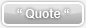
<style>
.page{position:relative;width:86px;height:28px}
.page>*{position:absolute;margin:0}
.t1{font:13.2px "ArialRoundedMTBold";color:#ffffff;scale:0.91 1}
</style>
<div class="page">
<p class="t1" style="left:17px;top:9px;width:52px;height:10px">“ Quote “</p>
</div>
